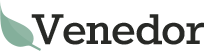
<style>
.page{position:relative;width:204px;height:51px;background:#ffffff}
.page>*{position:absolute;margin:0}
.t1{font:50px "Rokkitt-Bold";letter-spacing:-0.025em;color:#282926}
</style>
<div class="page">
<p class="t1" style="left:31px;top:14px;width:173px;height:31px">Venedor</p>
</div>
